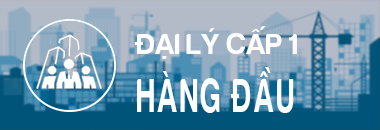
<style>
.page{position:relative;width:380px;height:130px}
.page>*{position:absolute;margin:0}
.t1{font:30px "FS-Harabara";color:#ffffff}
.t2{font:49px "FS-Harabara";letter-spacing:0.1em;color:#ffffff;scale:0.61 1}
</style>
<div class="page">
<p class="t1" style="left:134px;top:26px;width:163px;height:33px">ĐẠI LÝ CẤP 1</p>
<p class="t2" style="left:137px;top:67px;width:157px;height:46px">HÀNG ĐẦU</p>
</div>
